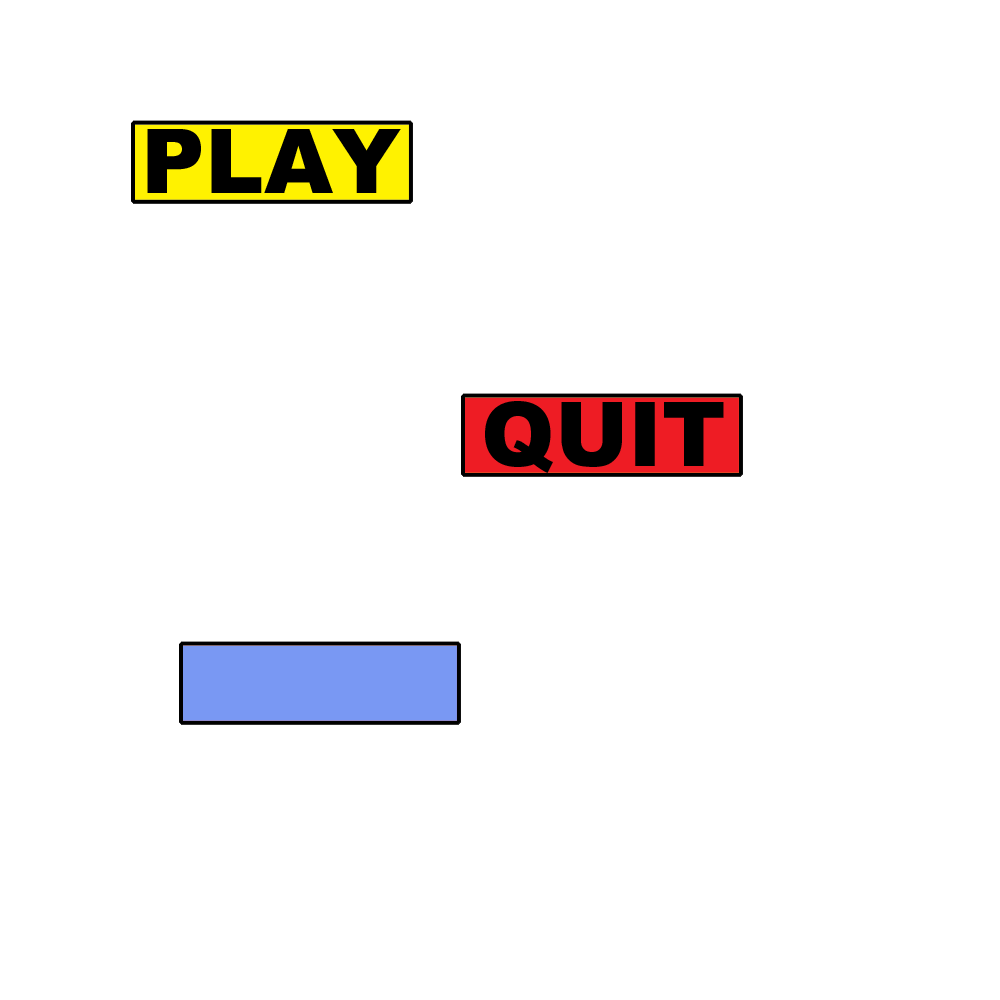
<style>
.page{position:relative;width:1000px;height:1000px;background:#ffffff}
.page>*{position:absolute;margin:0}
.t1{font:89.2px "Arial-Black";color:#000000}
</style>
<div class="page">
<p class="t1" style="left:147px;top:129px;width:254px;height:64px">PLAY</p>
<p class="t1" style="left:485px;top:401px;width:239px;height:72px">QUIT</p>
</div>
